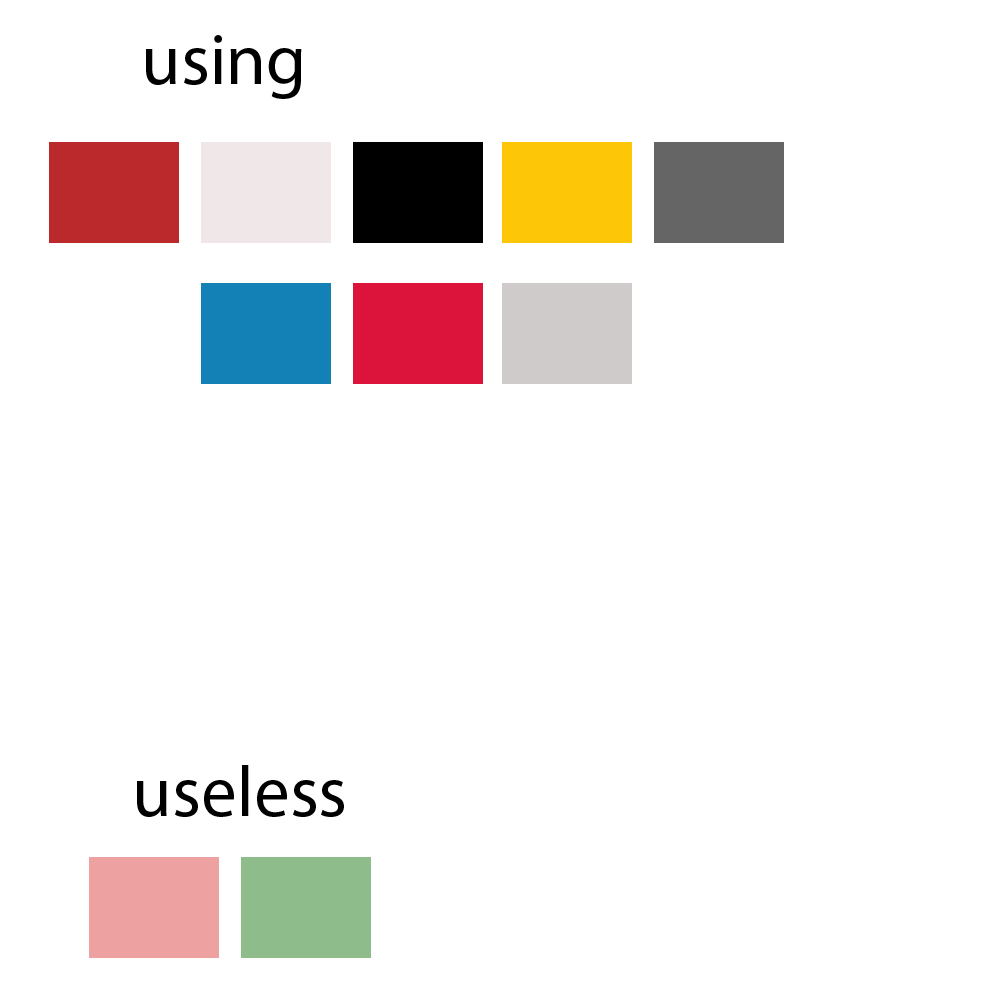
<style>
.page{position:relative;width:1000px;height:1000px;background:#ffffff}
.page>*{position:absolute;margin:0}
.t1{font:72px "MyriadPro-Regular";color:#000000}
</style>
<div class="page">
<p class="t1" style="left:146px;top:35px;width:156px;height:64px">using</p>
<p class="t1" style="left:137px;top:765px;width:207px;height:52px">useless</p>
</div>
